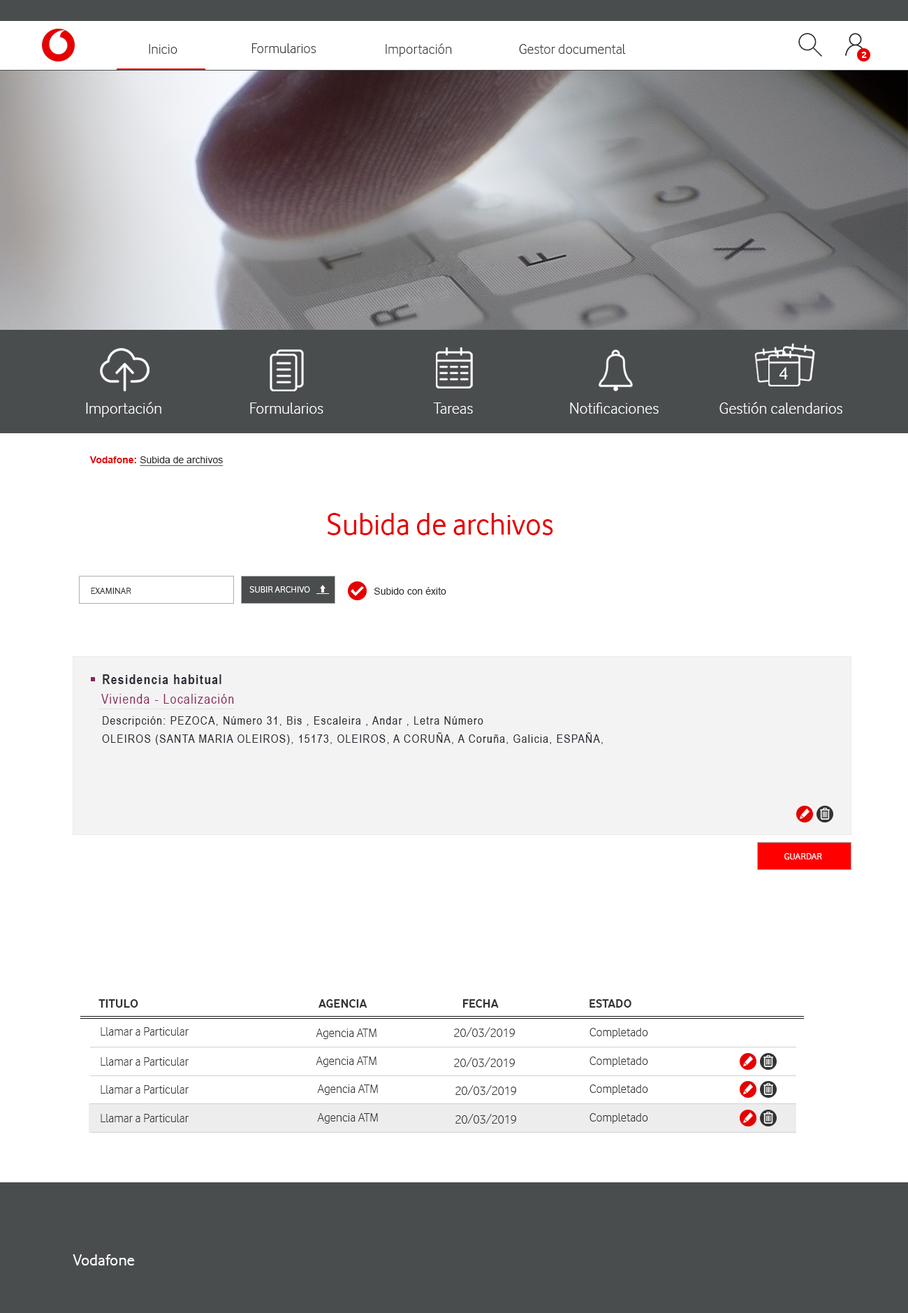
<style>
.page{position:relative;width:908px;height:1313px;background:#ffffff}
.page>*{position:absolute;margin:0}
.t1{font:14.7px "VodafoneLt-Regular";color:#333333}
.t2{font:9.8px "VodafoneRg-Bold";color:#ffffff}
.t3{font:18.2px "VodafoneRg-Regular";color:#ffffff}
.t4{font:16.8px "VodafoneLt-Regular";color:#ffffff}
.t5{font:9.8px "ArialMT";color:#333333;text-decoration:underline}
.t6{font:9.8px "Arial-BoldMT";color:#e60000}
.t7{font:31.4px "VodafoneRg-Regular";color:#e60000}
.t8{font:9.8px "VodafoneRg-Regular";color:#333333}
.t9{font:9.8px "VodafoneRg-Regular";color:#ffffff}
.t10{font:9.8px "ArialMT";color:#333333}
.t11{font:13.1px "ArialNarrow-Bold";letter-spacing:0.08em;color:#2d2d37}
.t12{font:13.1px "ArialNarrow";letter-spacing:0.08em;color:#832756}
.t13{font:11.8px "ArialNarrow";letter-spacing:0.08em;color:#2d2d37}
.t14{font:12.6px "VodafoneRg-Bold";color:#333333}
.t15{font:12.6px "VodafoneLt-Regular";color:#333333}
.t16{font:16.8px "VodafoneRg-Regular";color:#ffffff}
</style>
<div class="page">
<p class="t1" style="left:149px;top:44px;width:28px;height:10px">Inicio</p>
<p class="t1" style="left:252px;top:43px;width:65px;height:10px">Formularios</p>
<p class="t1" style="left:386px;top:43px;width:66px;height:14px">Importación</p>
<p class="t1" style="left:519px;top:44px;width:107px;height:10px">Gestor documental</p>
<p class="t2" style="left:861px;top:52px;width:6px;height:6px">2</p>
<p class="t3" style="left:779px;top:367px;width:9px;height:13px">4</p>
<p class="t4" style="left:86px;top:402px;width:75px;height:15px">Importación</p>
<p class="t4" style="left:720px;top:402px;width:123px;height:12px">Gestión calendarios</p>
<p class="t4" style="left:250px;top:402px;width:73px;height:12px">Formularios</p>
<p class="t4" style="left:433px;top:402px;width:40px;height:12px">Tareas</p>
<p class="t4" style="left:570px;top:402px;width:89px;height:12px">Notificaciones</p>
<p class="t5" style="left:89px;top:456px;width:135px;height:10px"><span class="t6">Vodafone: </span>Subida de archivos</p>
<p class="t7" style="left:327px;top:513px;width:226px;height:22px">Subida de archivos</p>
<p class="t8" style="left:91px;top:588px;width:40px;height:6px">EXAMINAR</p>
<p class="t9" style="left:249px;top:586px;width:61px;height:6px">SUBIR ARCHIVO</p>
<p class="t10" style="left:374px;top:587px;width:72px;height:8px">Subido con éxito</p>
<p class="t11" style="left:103px;top:674px;width:118px;height:10px">Residencia habitual</p>
<p class="t12" style="left:101px;top:694px;width:133px;height:10px">Vivienda - Localización</p>
<p class="t13" style="left:103px;top:716px;width:380px;height:11px">Descripción: PEZOCA, Número 31, Bis , Escaleira , Andar , Letra Número</p>
<p class="t13" style="left:102px;top:732px;width:501px;height:13px">OLEIROS (SANTA MARIA OLEIROS), 15173, OLEIROS, A CORUÑA, A Coruña, Galicia, ESPAÑA,</p>
<p class="t9" style="left:785px;top:853px;width:37px;height:6px">GUARDAR</p>
<p class="t14" style="left:99px;top:999px;width:39px;height:9px">TITULO</p>
<p class="t14" style="left:319px;top:999px;width:49px;height:9px">AGENCIA</p>
<p class="t14" style="left:463px;top:999px;width:36px;height:9px">FECHA</p>
<p class="t14" style="left:590px;top:999px;width:42px;height:9px">ESTADO</p>
<p class="t15" style="left:101px;top:1027px;width:88px;height:8px">Llamar a Particular</p>
<p class="t15" style="left:316px;top:1028px;width:61px;height:11px">Agencia ATM</p>
<p class="t15" style="left:454px;top:1027px;width:61px;height:10px">20/03/2019</p>
<p class="t15" style="left:590px;top:1028px;width:58px;height:10px">Completado</p>
<p class="t15" style="left:101px;top:1057px;width:88px;height:8px">Llamar a Particular</p>
<p class="t15" style="left:316px;top:1056px;width:61px;height:11px">Agencia ATM</p>
<p class="t15" style="left:454px;top:1057px;width:61px;height:10px">20/03/2019</p>
<p class="t15" style="left:590px;top:1056px;width:58px;height:11px">Completado</p>
<p class="t15" style="left:101px;top:1085px;width:88px;height:8px">Llamar a Particular</p>
<p class="t15" style="left:317px;top:1084px;width:61px;height:11px">Agencia ATM</p>
<p class="t15" style="left:456px;top:1085px;width:60px;height:10px">20/03/2019</p>
<p class="t15" style="left:590px;top:1084px;width:58px;height:11px">Completado</p>
<p class="t15" style="left:101px;top:1114px;width:88px;height:8px">Llamar a Particular</p>
<p class="t15" style="left:317px;top:1113px;width:61px;height:10px">Agencia ATM</p>
<p class="t15" style="left:456px;top:1114px;width:60px;height:9px">20/03/2019</p>
<p class="t15" style="left:590px;top:1113px;width:58px;height:10px">Completado</p>
<p class="t16" style="left:73px;top:1254px;width:62px;height:11px">Vodafone</p>
</div>
